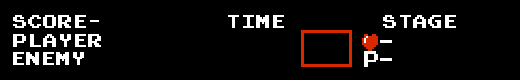
<style>
.page{position:relative;width:520px;height:80px;background:#000000}
.page>*{position:absolute;margin:0}
.t1{font:15.3px "PressStartReg";color:#ffffff}
</style>
<div class="page">
<p class="t1" style="left:13px;top:15px;width:86px;height:13px">SCORE-</p>
<p class="t1" style="left:228px;top:15px;width:56px;height:13px">TIME</p>
<p class="t1" style="left:383px;top:15px;width:73px;height:13px">STAGE</p>
<p class="t1" style="left:13px;top:34px;width:88px;height:13px">PLAYER</p>
<p class="t1" style="left:13px;top:52px;width:71px;height:13px">ENEMY</p>
</div>
